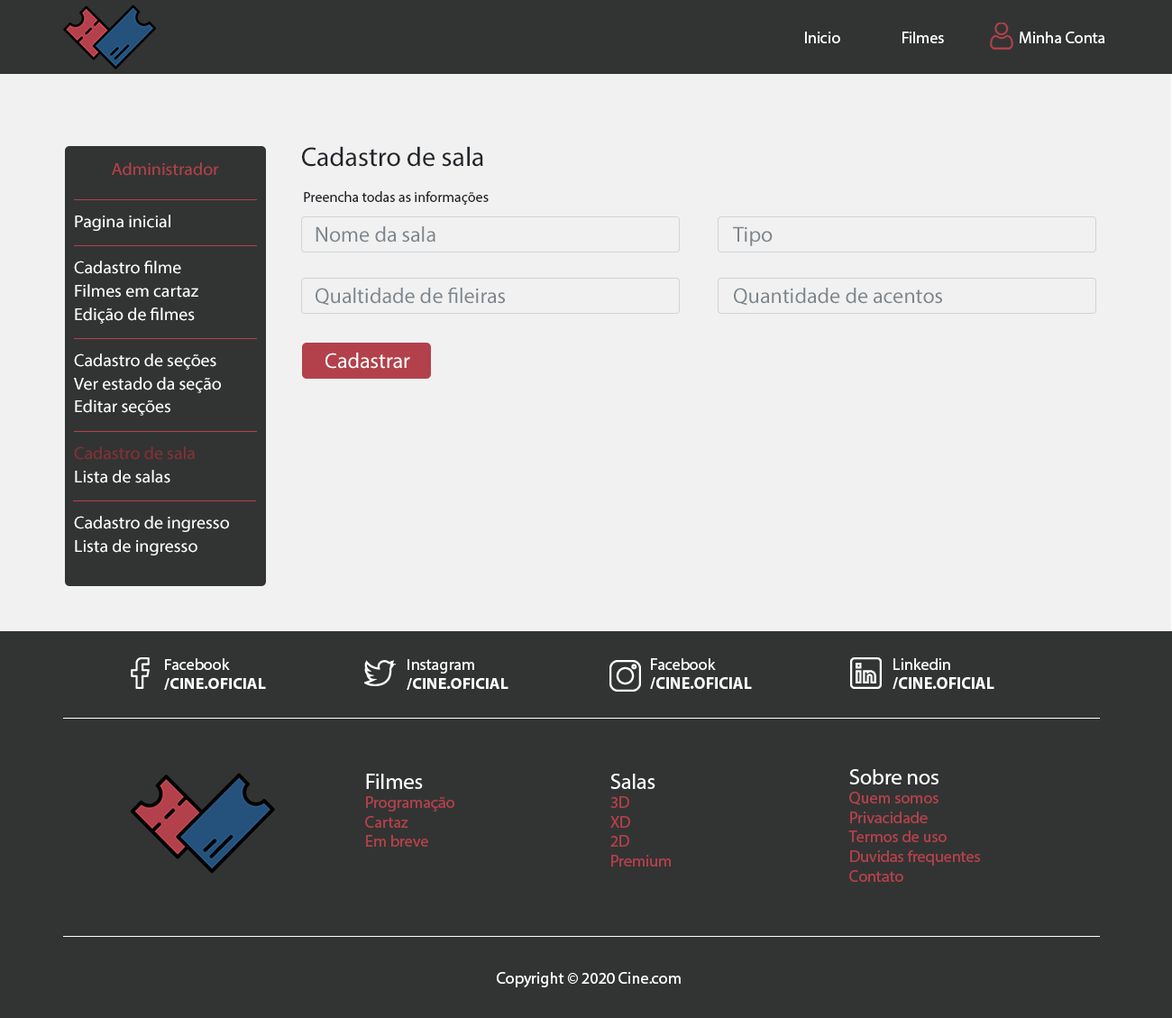
<style>
.page{position:relative;width:1172px;height:1018px;background:#323433}
.page>*{position:absolute;margin:0}
.t1{font:16.2px "MyriadPro-Regular";color:#ffffff}
.t2{font:27px "MyriadPro-Regular";color:#212529}
.t3{font:17.4px "MyriadPro-Regular";color:#b3414b}
.t4{font:14.4px "MyriadPro-Regular";color:#212529}
.t5{font:17.4px/23.2px "MyriadPro-Regular";color:#ffffff}
.t6{font:17.4px/23.2px "MyriadPro-Regular";color:#863037}
.t7{font:21.6px "MyriadPro-Regular";color:#7d858c}
.t8{font:21.6px "MyriadPro-Regular";color:#ffffff}
.t9{font:16px "MyriadPro-Bold";color:#ffffff}
.t10{font:16px "MyriadPro-Regular";color:#ffffff}
.t11{font:16.2px "MyriadPro-Bold";color:#ffffff}
.t12{font:16.2px "MyriadPro-Regular";color:#b3414b}
</style>
<div class="page">
<p class="t1" style="left:805px;top:32px;width:300px;height:11px">Inicio  Filmes        Minha Conta</p>
<p class="t2" style="left:302px;top:146px;width:181px;height:21px">Cadastro de sala</p>
<p class="t3" style="left:112px;top:162px;width:107px;height:14px">Administrador</p>
<p class="t4" style="left:304px;top:191px;width:185px;height:14px">Preencha todas as informações</p>
<p class="t5" style="left:74px;top:215px;width:155px;height:340px">Pagina inicial<br><br>Cadastro filme<br>Filmes em cartaz<br>Edição de filmes<br><br>Cadastro de seções<br>Ver estado da seção<br>Editar seções<br><br><span class="t6">Cadastro de sala<br></span>Lista de salas<br><br>Cadastro de ingresso<br>Lista de ingresso</p>
<p class="t7" style="left:315px;top:226px;width:120px;height:16px">Nome da sala</p>
<p class="t7" style="left:733px;top:226px;width:39px;height:20px">Tipo</p>
<p class="t7" style="left:315px;top:287px;width:190px;height:19px">Qualtidade de fileiras</p>
<p class="t7" style="left:734px;top:288px;width:208px;height:18px">Quantidade de acentos</p>
<p class="t8" style="left:325px;top:352px;width:85px;height:17px">Cadastrar</p>
<p class="t9" style="left:164px;top:658px;width:102px;height:32px"><span class="t10">Facebook<br></span>/CINE.OFICIAL</p>
<p class="t9" style="left:407px;top:659px;width:101px;height:31px"><span class="t10">Instagram<br></span>/CINE.OFICIAL</p>
<p class="t11" style="left:650px;top:658px;width:102px;height:31px"><span class="t1">Facebook<br></span>/CINE.OFICIAL</p>
<p class="t11" style="left:892px;top:658px;width:102px;height:31px"><span class="t1">Linkedin<br></span>/CINE.OFICIAL</p>
<p class="t12" style="left:365px;top:773px;width:89px;height:73px"><span class="t8">Filmes<br></span>Programação<br>Cartaz<br>Em breve</p>
<p class="t12" style="left:610px;top:773px;width:61px;height:93px"><span class="t8">Salas<br></span>3D<br>XD<br>2D<br>Premium</p>
<p class="t12" style="left:848px;top:769px;width:132px;height:113px"><span class="t8">Sobre nos<br></span>Quem somos<br>Privacidade<br>Termos de uso<br>Duvidas frequentes<br>Contato</p>
<p class="t1" style="left:497px;top:972px;width:184px;height:15px">Copyright © 2020 Cine.com</p>
</div>
